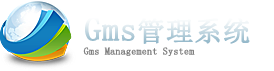
<style>
.page{position:relative;width:274px;height:71px;background:#ffffff}
.page>*{position:absolute;margin:0}
.t1{font:27.7px "NSimSun";font-weight:bold}
.t2{font:33.3px "NSimSun";font-weight:bold}
.t3{font:10px "NSimSun";color:#7f7f7f;font-weight:bold}
</style>
<div class="page">
<p class="t1" style="left:85px;top:17px;width:165px;height:27px"><span class="t2">Gms</span>管理系统</p>
<p class="t3" style="left:83px;top:47px;width:112px;height:9px">Gms Management System</p>
</div>
